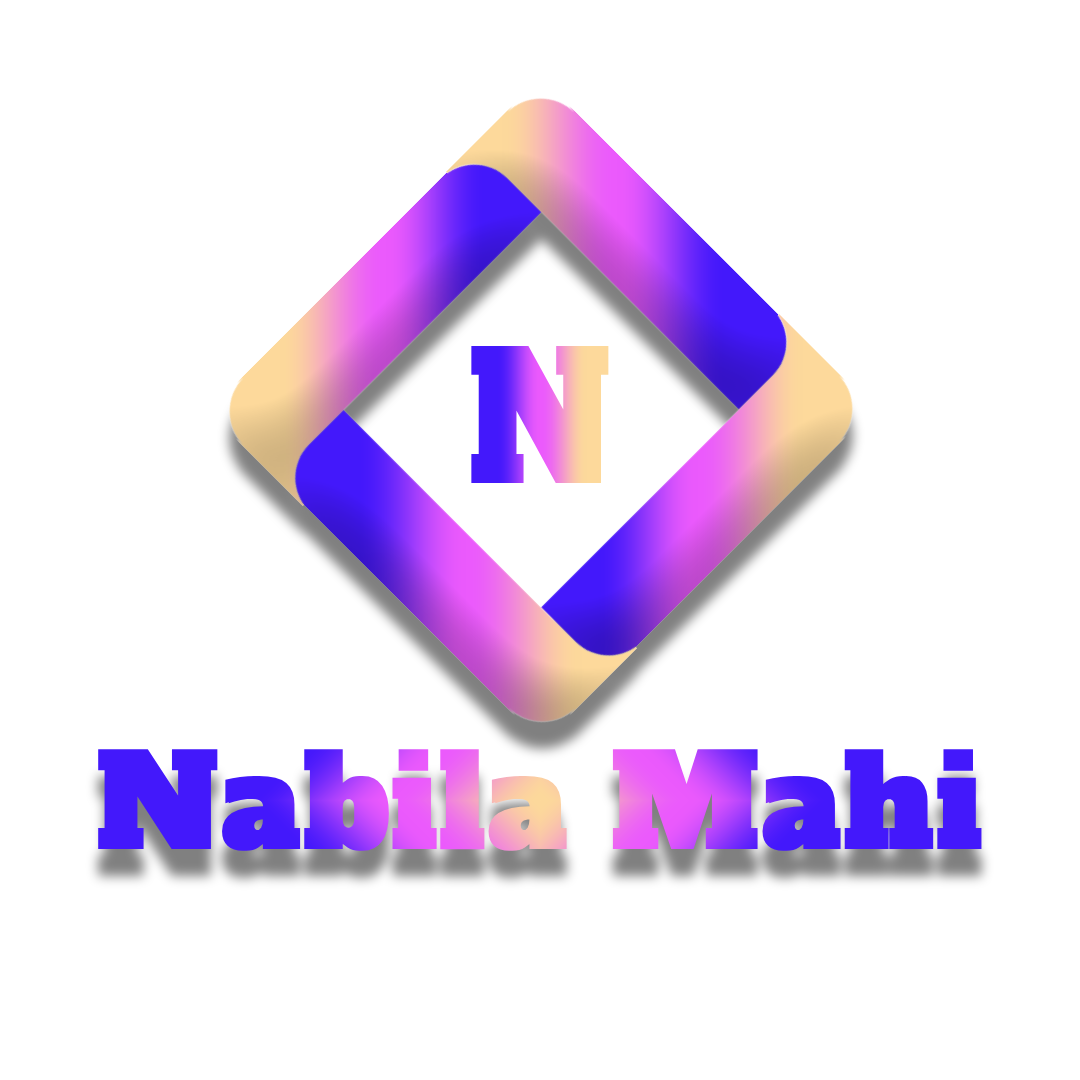
<style>
.page{position:relative;width:1080px;height:1080px;background:#ffffff}
.page>*{position:absolute;margin:0}
.t1{font:176.2px "AlfaSlabOne-Regular";font-weight:bold;scale:0.84 1}
.t2{font:128.1px "AlfaSlabOne-Regular";font-weight:bold}
</style>
<div class="page">
<p class="t1" style="left:471px;top:346px;width:138px;height:137px">N</p>
<p class="t2" style="left:98px;top:749px;width:884px;height:102px">Nabila Mahi</p>
</div>
